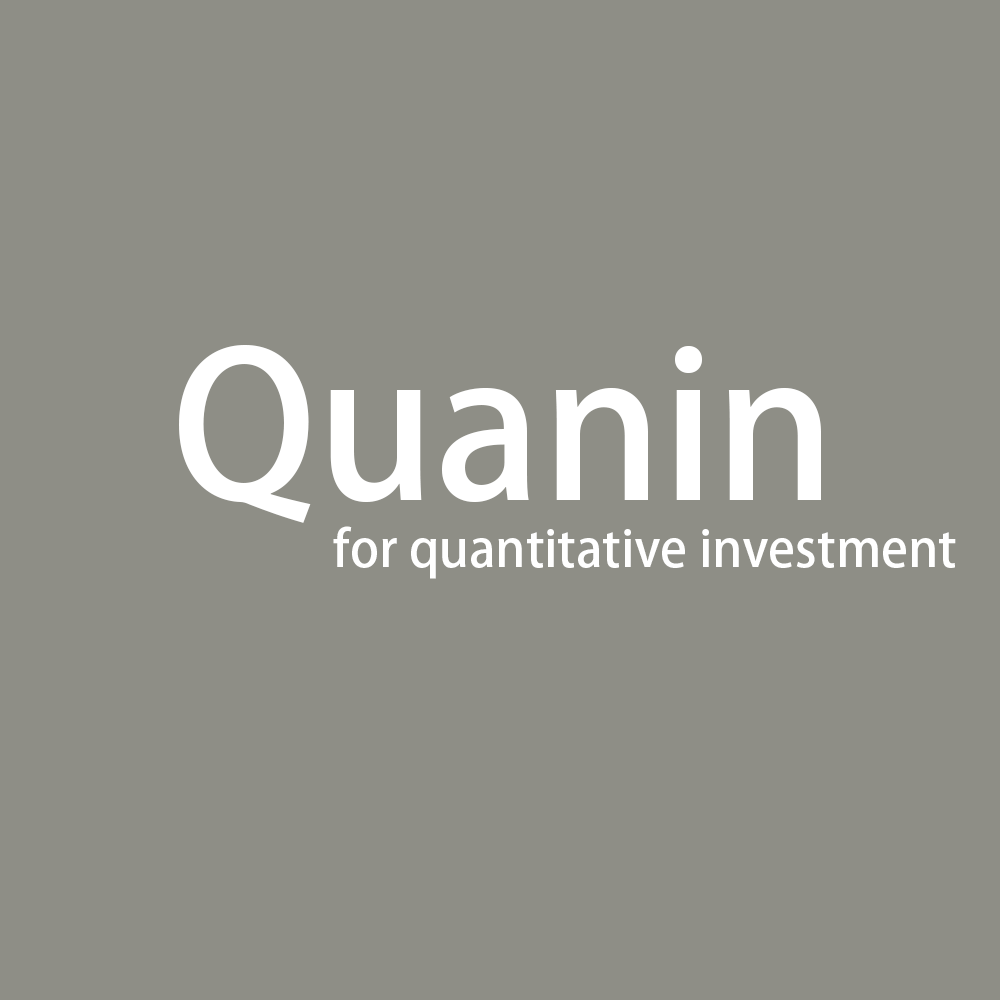
<style>
.page{position:relative;width:1000px;height:1000px;background:#8e8e86}
.page>*{position:absolute;margin:0}
.t1{font:200px "AdobeHeitiStd-Regular";color:#ffffff}
.t2{font:50px "AdobeHeitiStd-Regular";color:#ffffff}
</style>
<div class="page">
<p class="t1" style="left:179px;top:345px;width:642px;height:178px">Quanin</p>
<p class="t2" style="left:333px;top:526px;width:623px;height:53px">for quantitative investment</p>
</div>
